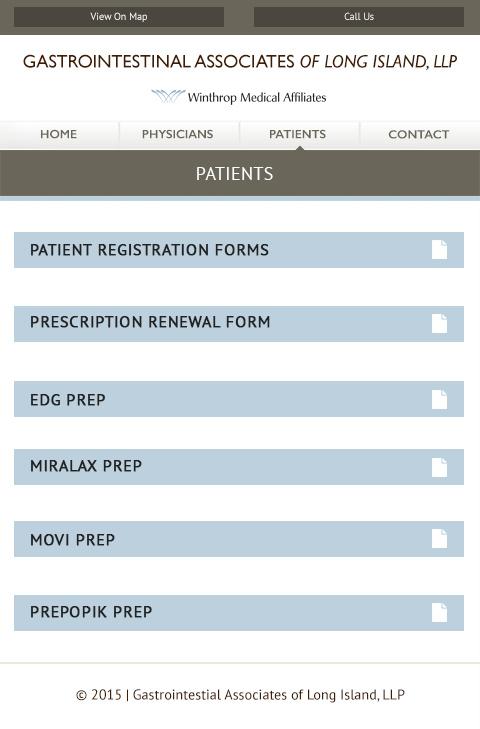
<style>
.page{position:relative;width:480px;height:729px;background:#ffffff}
.page>*{position:absolute;margin:0}
.t1{font:10.1px "PTSans-Regular";color:#ffffff}
.t2{font:10.1px "PTSans-Regular"}
.t3{font:18.2px "GillSans";color:#401c01}
.t4{font:18.2px "GillSans-Italic";color:#401c01}
.t5{font:12.2px "GillSans-SemiBold";color:#6b665a}
.t6{font:12.1px "GillSans-SemiBold";color:#6b665a}
.t7{font:18.3px "PTSans-Regular";letter-spacing:0.02em;color:#ffffff;text-transform:uppercase}
.t8{font:16.2px/18px "PTSans-Regular";letter-spacing:0.02em;color:#222222;text-transform:uppercase;font-weight:bold}
.t9{font:16.2px/20px "PTSans-Regular";letter-spacing:0.02em;color:#222222;text-transform:uppercase;font-weight:bold}
.t10{font:14.2px "PTSans-Regular";color:#401c01}
</style>
<div class="page">
<p class="t1" style="left:90px;top:12px;width:57px;height:10px">View On Map</p>
<p class="t2" style="left:344px;top:12px;width:30px;height:8px">Call Us</p>
<p class="t3" style="left:23px;top:54px;width:434px;height:16px">GASTROINTESTINAL ASSOCIATES <span class="t4">OF LONG ISLAND, LLP</span></p>
<p class="t5" style="left:41px;top:129px;width:36px;height:10px">HOME</p>
<p class="t5" style="left:142px;top:129px;width:71px;height:10px">PHYSICIANS</p>
<p class="t5" style="left:270px;top:129px;width:56px;height:10px">PATIENTS</p>
<p class="t6" style="left:388px;top:130px;width:62px;height:9px">CONTACT</p>
<p class="t7" style="left:197px;top:167px;width:76px;height:13px">PATIENTS</p>
<p class="t8" style="left:31px;top:244px;width:239px;height:374px">Patient Registration Forms<br><br><br><br>Prescription Renewal Form<br><br><br><br><br>EDG prep<br><br><br><br><br><span class="t9">MIRALAX pREP<br><br><br><br></span>mOVI pREP<br><br><br><br>pREPOpIK pREP</p>
<p class="t10" style="left:76px;top:689px;width:329px;height:14px">© 2015 | Gastrointestial Associates of Long Island, LLP</p>
</div>
